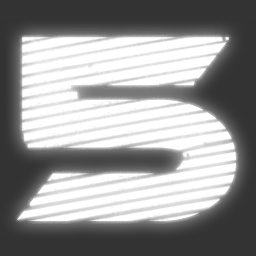
<style>
.page{position:relative;width:256px;height:256px;background:#ffffff}
.page>*{position:absolute;margin:0}
.t1{font:254.7px "Ethnocentric";letter-spacing:0.05em;color:#ffffff}
</style>
<div class="page">
<p class="t1" style="left:16px;top:37px;width:220px;height:184px">5</p>
</div>
